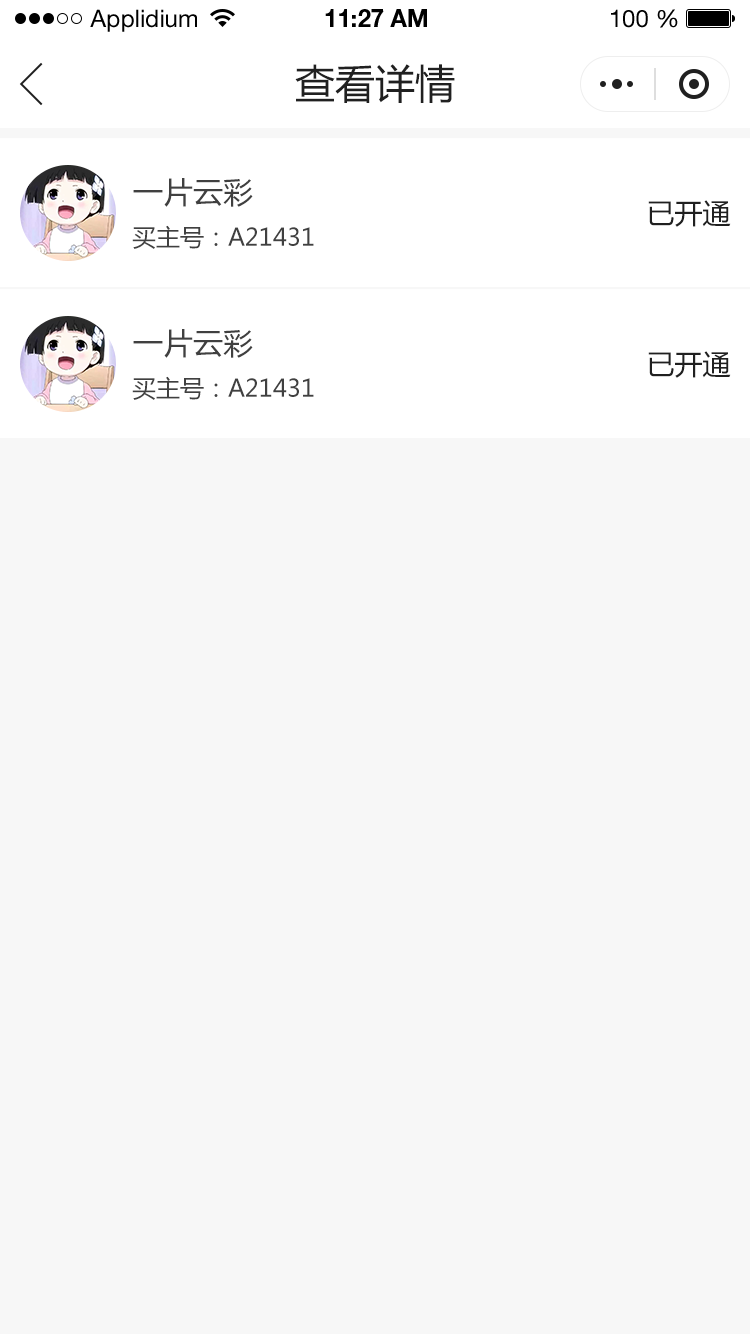
<style>
.page{position:relative;width:750px;height:1334px;background:#f7f7f7}
.page>*{position:absolute;margin:0}
.t1{font:24px "HelveticaNeueLTStd-Roman";color:#000000}
.t2{font:24px "HelveticaNeueLTStd-Bd";color:#000000}
.t3{font:40px "MicrosoftYaHei";color:#202020;text-transform:uppercase}
.t4{font:30px "MicrosoftYaHei";color:#404040;text-transform:uppercase}
.t5{font:28px "MicrosoftYaHei";color:#202020;text-transform:uppercase}
.t6{font:24px "MicrosoftYaHei";color:#404040;text-transform:uppercase}
</style>
<div class="page">
<p class="t1" style="left:90px;top:9px;width:107px;height:23px">Applidium</p>
<p class="t2" style="left:325px;top:9px;width:102px;height:18px">11:27 AM</p>
<p class="t1" style="left:611px;top:9px;width:67px;height:19px">100 %</p>
<p class="t3" style="left:295px;top:64px;width:160px;height:39px">查看详情</p>
<p class="t4" style="left:133px;top:178px;width:120px;height:29px">一片云彩</p>
<p class="t5" style="left:648px;top:200px;width:83px;height:27px">已开通</p>
<p class="t6" style="left:132px;top:225px;width:182px;height:24px">买主号：A21431</p>
<p class="t4" style="left:133px;top:329px;width:120px;height:29px">一片云彩</p>
<p class="t5" style="left:648px;top:351px;width:83px;height:27px">已开通</p>
<p class="t6" style="left:132px;top:376px;width:182px;height:24px">买主号：A21431</p>
</div>
